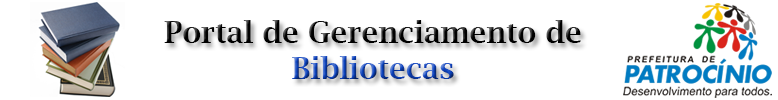
<style>
.page{position:relative;width:778px;height:100px;background:#ffffff}
.page>*{position:absolute;margin:0}
.t1{font:30px "LucidaBright-Demi"}
</style>
<div class="page">
<p class="t1" style="left:164px;top:20px;width:417px;height:59px;text-align:center">Portal de Gerenciamento de<br>Bibliotecas</p>
</div>
